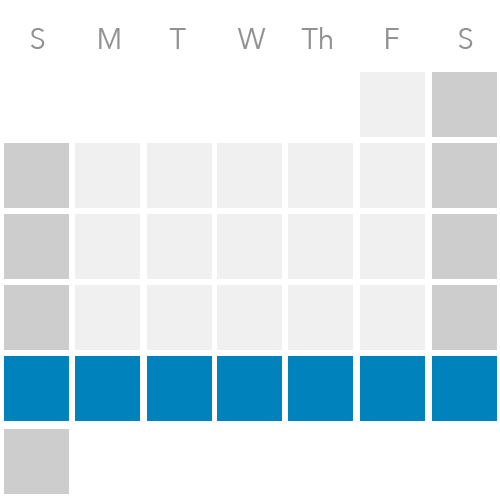
<style>
.page{position:relative;width:500px;height:500px;background:#ffffff}
.page>*{position:absolute;margin:0}
.t1{font:28.8px "AvenirNext-Regular";color:#929292}
</style>
<div class="page">
<p class="t1" style="left:30px;top:28px;width:15px;height:21px">S</p>
<p class="t1" style="left:99px;top:28px;width:21px;height:21px">M</p>
<p class="t1" style="left:169px;top:28px;width:17px;height:21px">T</p>
<p class="t1" style="left:237px;top:28px;width:29px;height:21px">W</p>
<p class="t1" style="left:301px;top:27px;width:31px;height:22px">Th</p>
<p class="t1" style="left:386px;top:28px;width:13px;height:21px">F</p>
<p class="t1" style="left:458px;top:28px;width:15px;height:21px">S</p>
</div>
